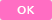
<style>
.page{position:relative;width:52px;height:20px;background:#ff6ec3}
.page>*{position:absolute;margin:0}
.t1{font:12px "Ubuntu-Medium";color:#ffffff}
</style>
<div class="page">
<p class="t1" style="left:17px;top:6px;width:18px;height:8px">OK</p>
</div>
